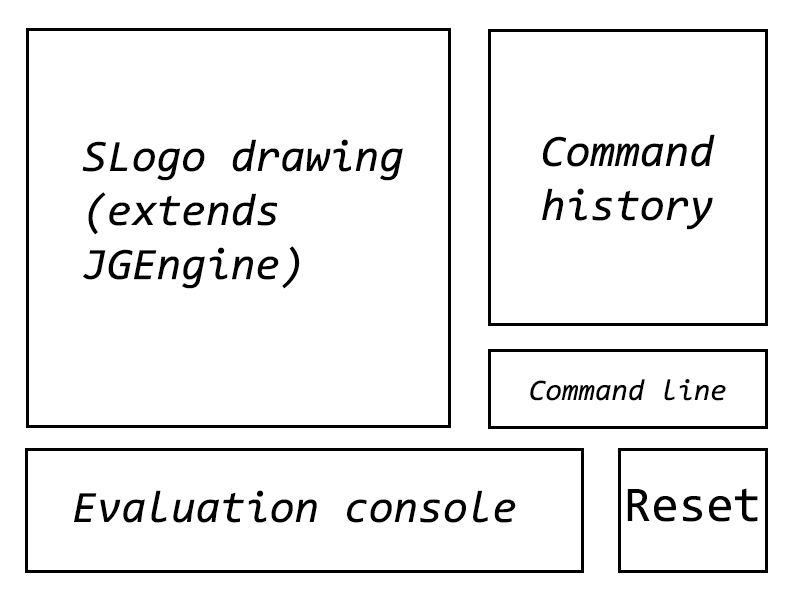
<style>
.page{position:relative;width:800px;height:600px;background:#ffffff}
.page>*{position:absolute;margin:0}
.t1{font:45px "Consolas-Italic";color:#000000}
.t2{font:30px "Consolas-Italic";color:#000000}
.t3{font:50px "Consolas";color:#000000}
</style>
<div class="page">
<p class="t1" style="left:542px;top:134px;width:173px;height:96px">Command<br>history</p>
<p class="t1" style="left:82px;top:139px;width:321px;height:150px">SLogo drawing<br>(extends<br>JGEngine)</p>
<p class="t2" style="left:530px;top:379px;width:196px;height:22px">Command line</p>
<p class="t1" style="left:74px;top:490px;width:442px;height:33px">Evaluation console</p>
<p class="t3" style="left:627px;top:488px;width:131px;height:34px">Reset</p>
</div>
